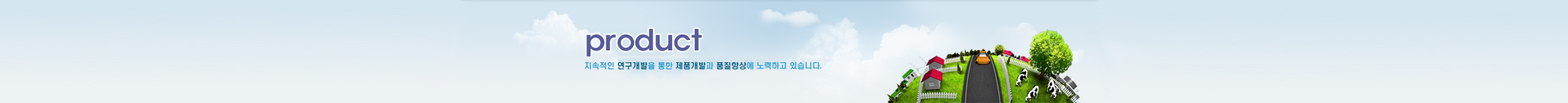
<style>
.page{position:relative;width:1568px;height:103px}
.page>*{position:absolute;margin:0}
.t1{font:27.7px "ExpoM-HM";color:#565b9a}
.t2{font:7.6px "H2hdrM";color:#329fd0}
.t3{font:7.6px "H2hdrM";color:#0a5e84}
</style>
<div class="page">
<p class="t1" style="left:586px;top:28px;width:116px;height:29px">product</p>
<p class="t2" style="left:584px;top:62px;width:237px;height:8px">지속적인 <span class="t3">연구개발</span>을 통한 <span class="t3">제품개발</span>과 <span class="t3">품질향상</span>에 노력하고 있습니다.</p>
</div>
